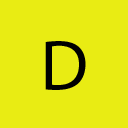
<style>
.page{position:relative;width:128px;height:128px;background:#e9ec13}
.page>*{position:absolute;margin:0}
.t1{font:72px "MyriadPro-Regular";color:#000000}
</style>
<div class="page">
<p class="t1" style="left:45px;top:41px;width:41px;height:49px">D</p>
</div>
